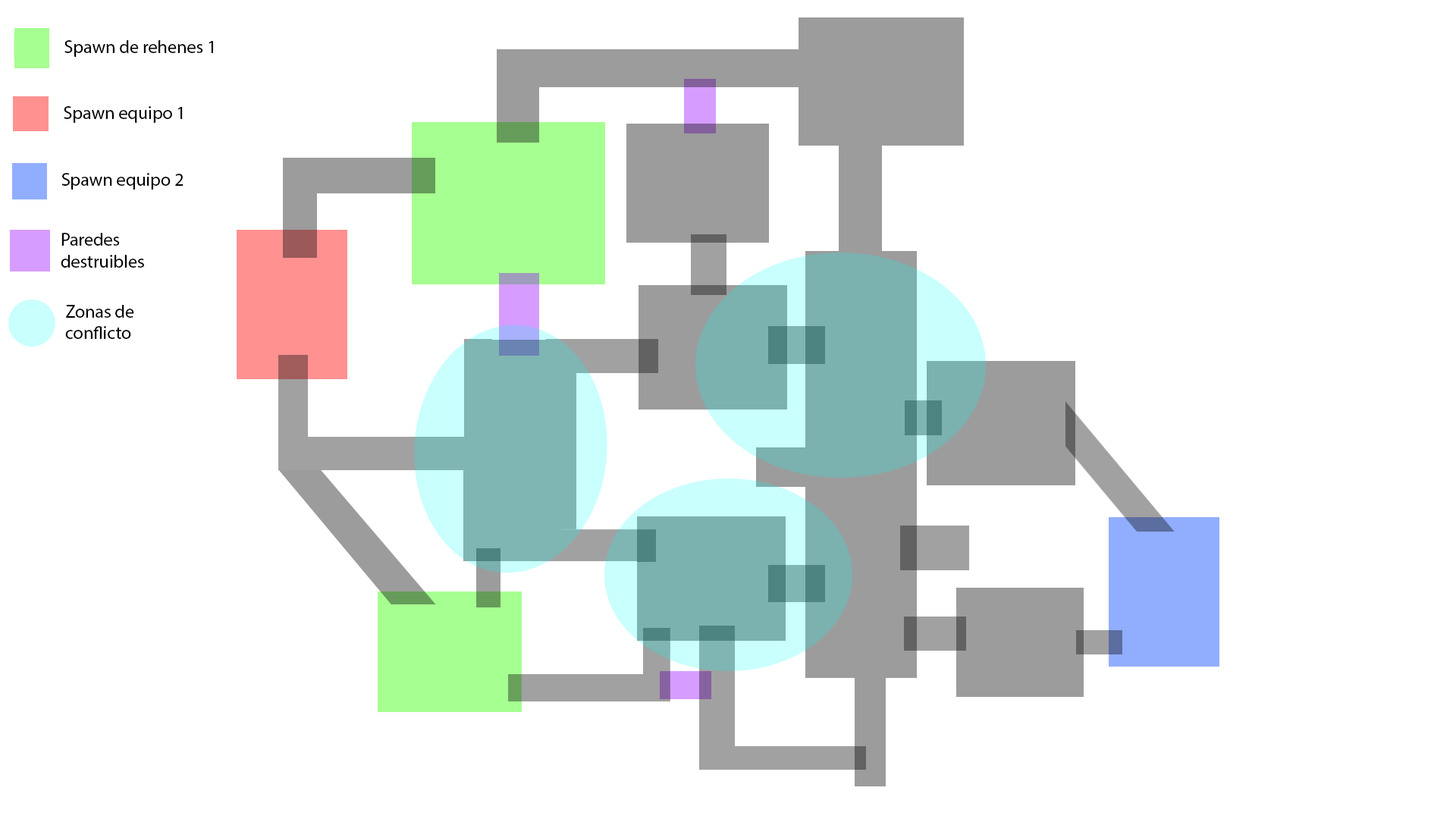
<style>
.page{position:relative;width:1456px;height:819px;background:#ffffff}
.page>*{position:absolute;margin:0}
.t1{font:18.2px "MyriadPro-Regular";color:#000000}
</style>
<div class="page">
<p class="t1" style="left:64px;top:40px;width:149px;height:17px">Spawn de rehenes 1</p>
<p class="t1" style="left:64px;top:106px;width:119px;height:17px">Spawn equipo 1</p>
<p class="t1" style="left:61px;top:173px;width:123px;height:17px">Spawn equipo 2</p>
<p class="t1" style="left:61px;top:233px;width:83px;height:35px">Paredes destruibles</p>
<p class="t1" style="left:65px;top:305px;width:69px;height:34px">Zonas de conflicto</p>
</div>
